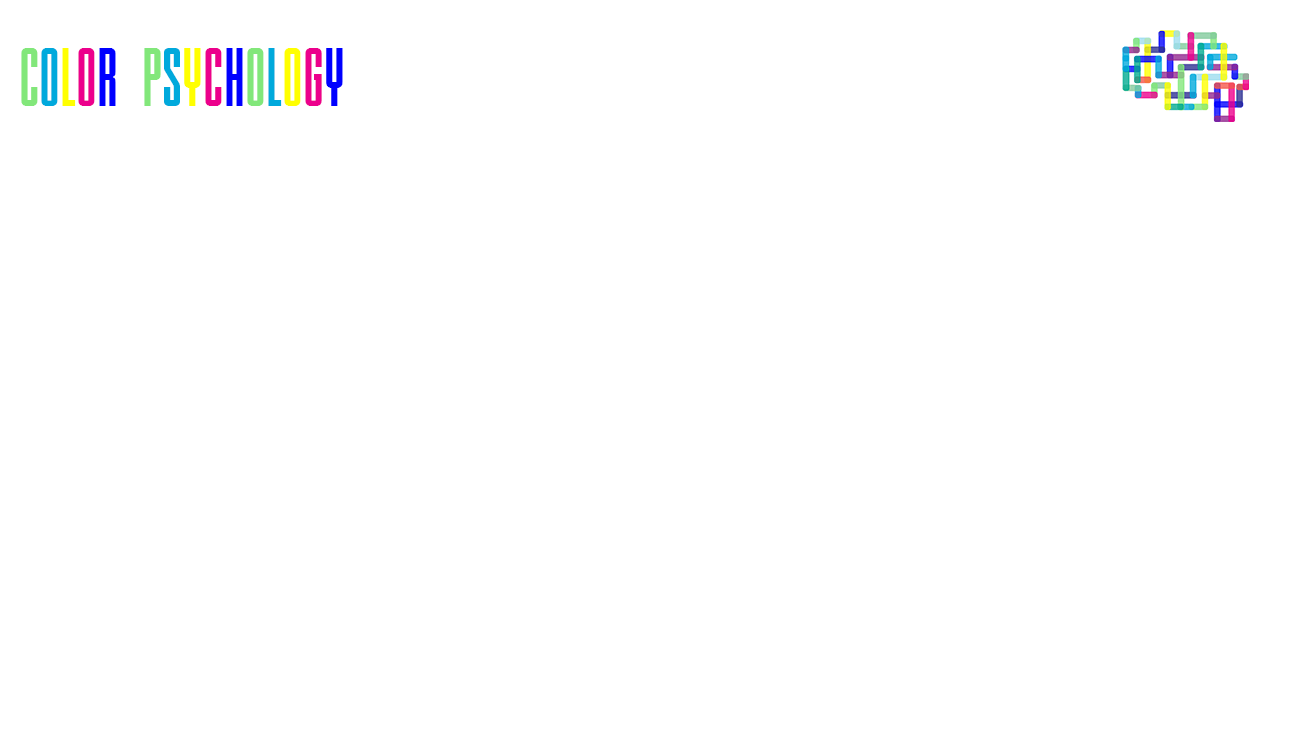
<style>
.page{position:relative;width:1300px;height:750px;background:#ffffff}
.page>*{position:absolute;margin:0}
.t1{font:79.3px "DELIRIUMNCV";color:#82e77a}
.t2{font:79.3px "DELIRIUMNCV";color:#00a9dc}
.t3{font:79.3px "DELIRIUMNCV";color:#ffff00}
.t4{font:79.3px "DELIRIUMNCV";color:#ec008c}
.t5{font:79.3px "DELIRIUMNCV";color:#0000ff}
</style>
<div class="page">
<p class="t1" style="left:21px;top:48px;width:322px;height:58px">C<span class="t2">o</span><span class="t3">l</span><span class="t4">o</span><span class="t5">r   </span>P<span class="t2">s</span><span class="t3">y</span><span class="t4">c</span><span class="t5">h</span>o<span class="t2">l</span><span class="t3">o</span><span class="t4">g</span><span class="t5">y</span></p>
</div>
